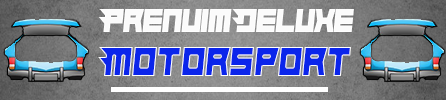
<style>
.page{position:relative;width:446px;height:100px}
.page>*{position:absolute;margin:0}
.t1{font:33.3px "Hindsight2020";color:#fbfbfb;scale:0.92 1}
.t2{font:41.7px "Hindsight2020";color:#0b25eb;scale:0.92 1}
</style>
<div class="page">
<p class="t1" style="left:98px;top:9px;width:256px;height:23px">Prenuim Deluxe</p>
<p class="t2" style="left:98px;top:47px;width:253px;height:29px">Motorsport</p>
</div>
